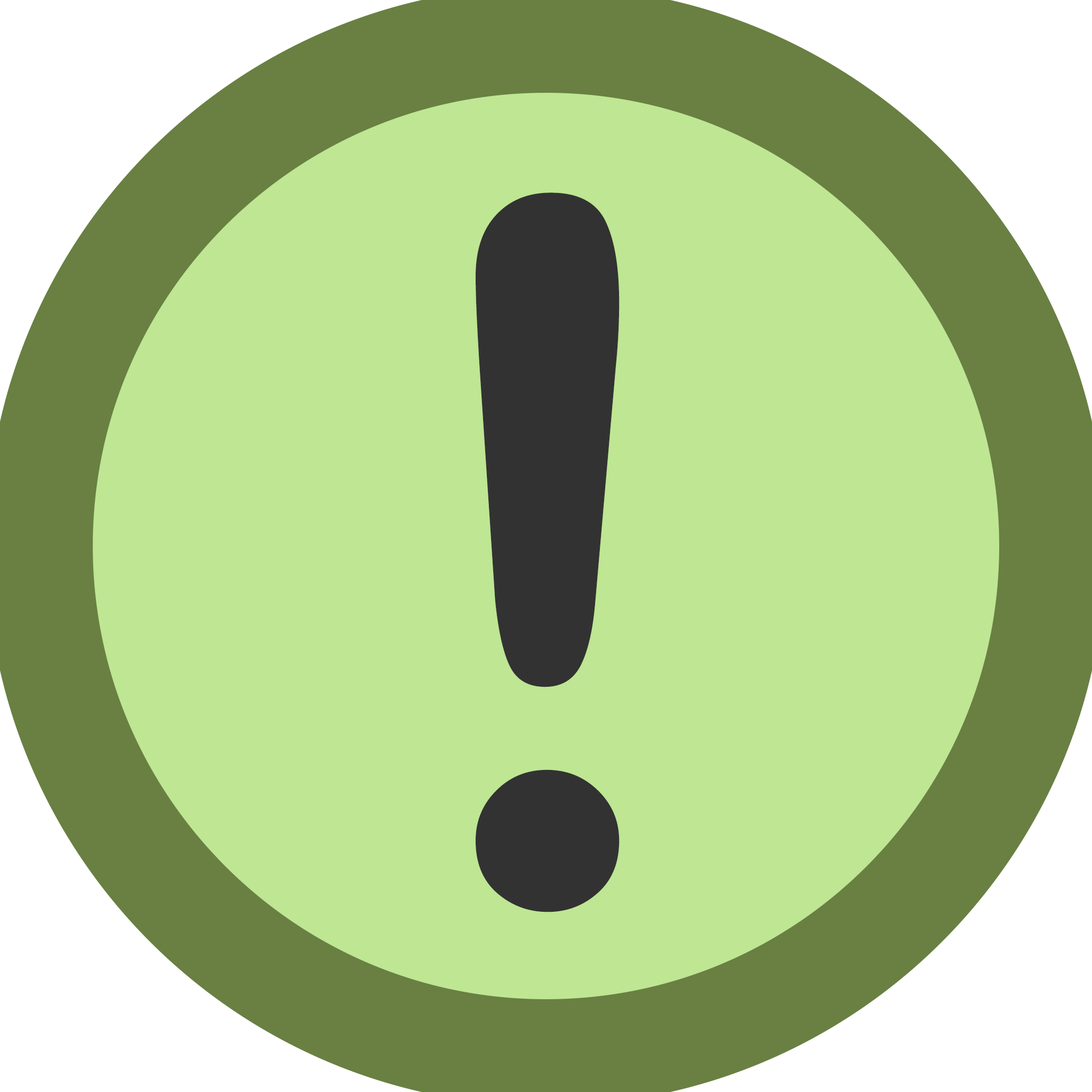
<style>
.page{position:relative;width:1092px;height:1092px;background:#bee693}
.page>*{position:absolute;margin:0}
.t1{font:972.9px "ArialRoundedMTBold";letter-spacing:0.075em;color:#323232}
</style>
<div class="page">
<p class="t1" style="left:476px;top:192px;width:144px;height:720px">!</p>
</div>
